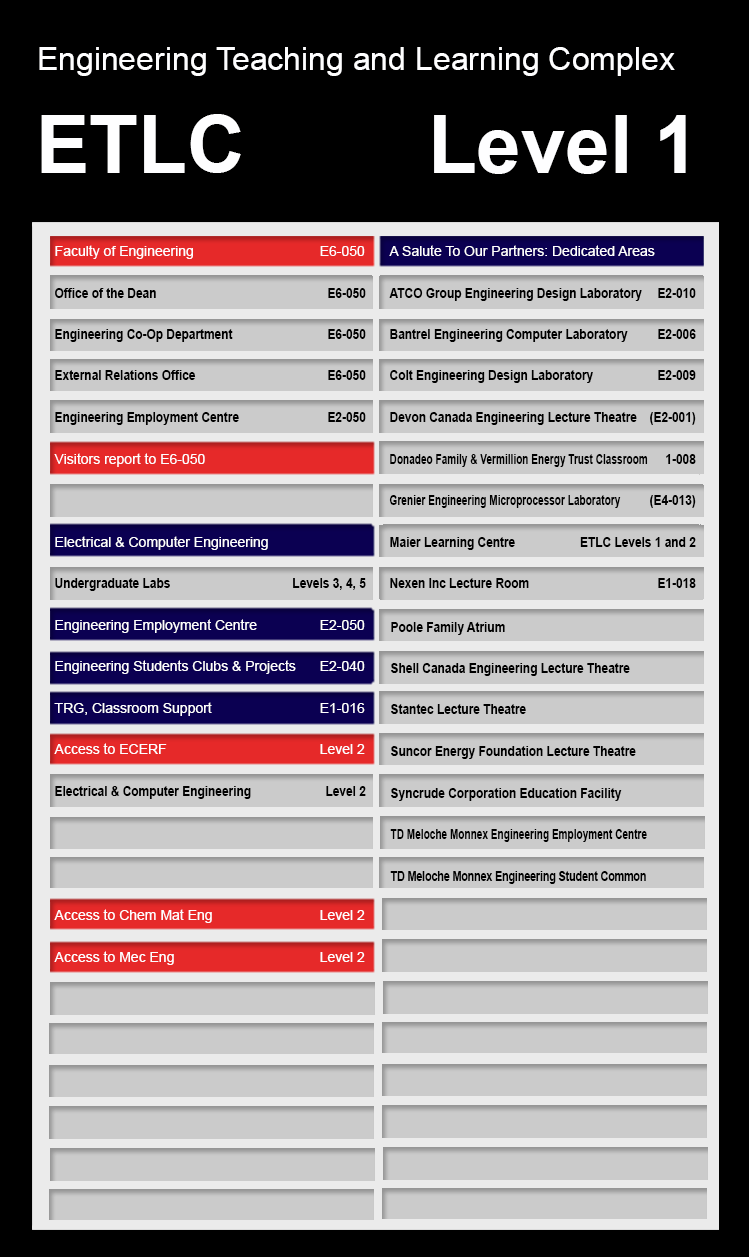
<style>
.page{position:relative;width:749px;height:1257px;background:#cbcbcb}
.page>*{position:absolute;margin:0}
.t1{font:32px "ArialMT";color:#fefeff}
.t2{font:80px "Arial-BoldMT";color:#fefeff}
.t3{font:14px "ArialMT";color:#fefeff}
.t4{font:14px/37.6px "Arial-BoldMT";color:#000000;scale:0.85 1}
.t5{font:14px/37.6px "Arial-BoldMT";color:#000000;scale:0.72 1}
.t6{font:14px/37.6px "Arial-BoldMT";color:#000000;scale:0.75 1}
</style>
<div class="page">
<p class="t1" style="left:39px;top:47px;width:636px;height:29px">Engineering Teaching and Learning Complex</p>
<p class="t2" style="left:41px;top:114px;width:200px;height:59px">ETLC</p>
<p class="t2" style="left:434px;top:115px;width:252px;height:59px">Level 1</p>
<p class="t3" style="left:389px;top:245px;width:266px;height:11px">A Salute To Our Partners: Dedicated Areas</p>
<p class="t4" style="left:55px;top:288px;width:196px;height:511px">Office of the Dean<br>Engineering Co-Op Department<br>External Relations Office<br>Engineering Employment Centre<br><br><br><br>Undergraduate Labs<br><br><br><br><br>Electrical &amp; Computer Engineering</p>
<p class="t4" style="left:389px;top:288px;width:259px;height:300px">ATCO Group Engineering Design Laboratory<br>Bantrel Engineering Computer Laboratory<br>Colt Engineering Design Laboratory<br>Devon Canada Engineering Lecture Theatre<br><span class="t5">Donadeo Family &amp; Vermillion Energy Trust Classroom<br>Grenier Engineering Microprocessor Laboratory<br></span>Maier Learning Centre<br>Nexen Inc Lecture Room</p>
<p class="t4" style="left:580px;top:288px;width:116px;height:300px;text-align:right">E2-010<br>E2-006<br>E2-009<br>(E2-001)<br>1-008<br>(E4-013)<br>ETLC Levels 1 and 2<br>E1-018</p>
<p class="t4" style="left:390px;top:622px;width:257px;height:262px">Poole Family Atrium<br>Shell Canada Engineering Lecture Theatre<br>Stantec Lecture Theatre<br>Suncor Energy Foundation Lecture Theatre<br>Syncrude Corporation Education Facility<br><span class="t5">TD Meloche Monnex Engineering Employment Centre<br></span><span class="t6">TD Meloche Monnex Engineering Student Common</span></p>
</div>
